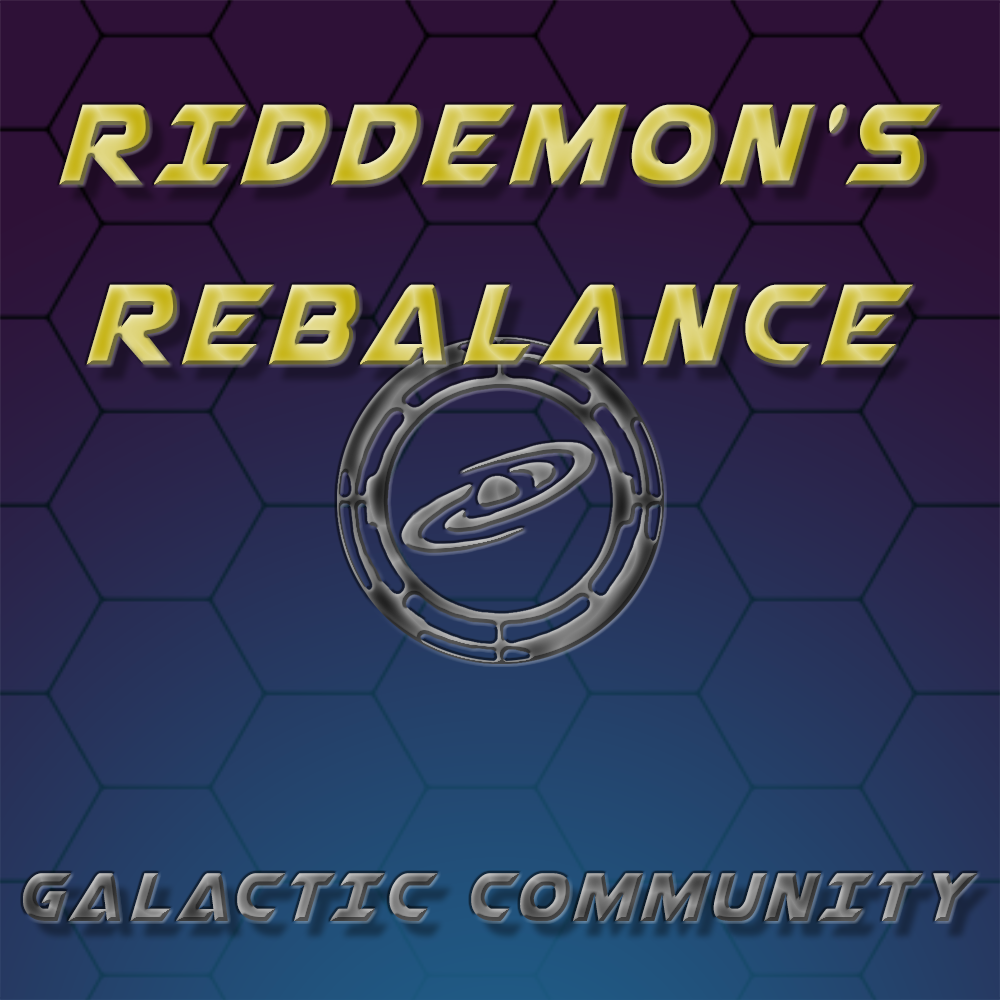
<style>
.page{position:relative;width:1000px;height:1000px}
.page>*{position:absolute;margin:0}
.t1{font:150px "AirstrikeCondensed";letter-spacing:0.08em;text-transform:uppercase}
.t2{font:90px "AirstrikeCondensed";letter-spacing:0.08em;text-transform:uppercase}
</style>
<div class="page">
<p class="t1" style="left:59px;top:104px;width:882px;height:261px;text-align:center">Riddemon's<br>Rebalance</p>
<p class="t2" style="left:23px;top:873px;width:955px;height:48px">Galactic Community</p>
</div>
